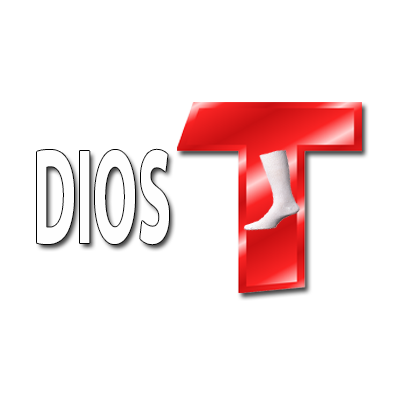
<style>
.page{position:relative;width:400px;height:400px;background:#ffffff}
.page>*{position:absolute;margin:0}
.t1{font:137.1px "MyriadPro-Bold";color:#fefefe;scale:0.45 1}
</style>
<div class="page">
<p class="t1" style="left:37px;top:149px;width:132px;height:96px">DIOS</p>
</div>
